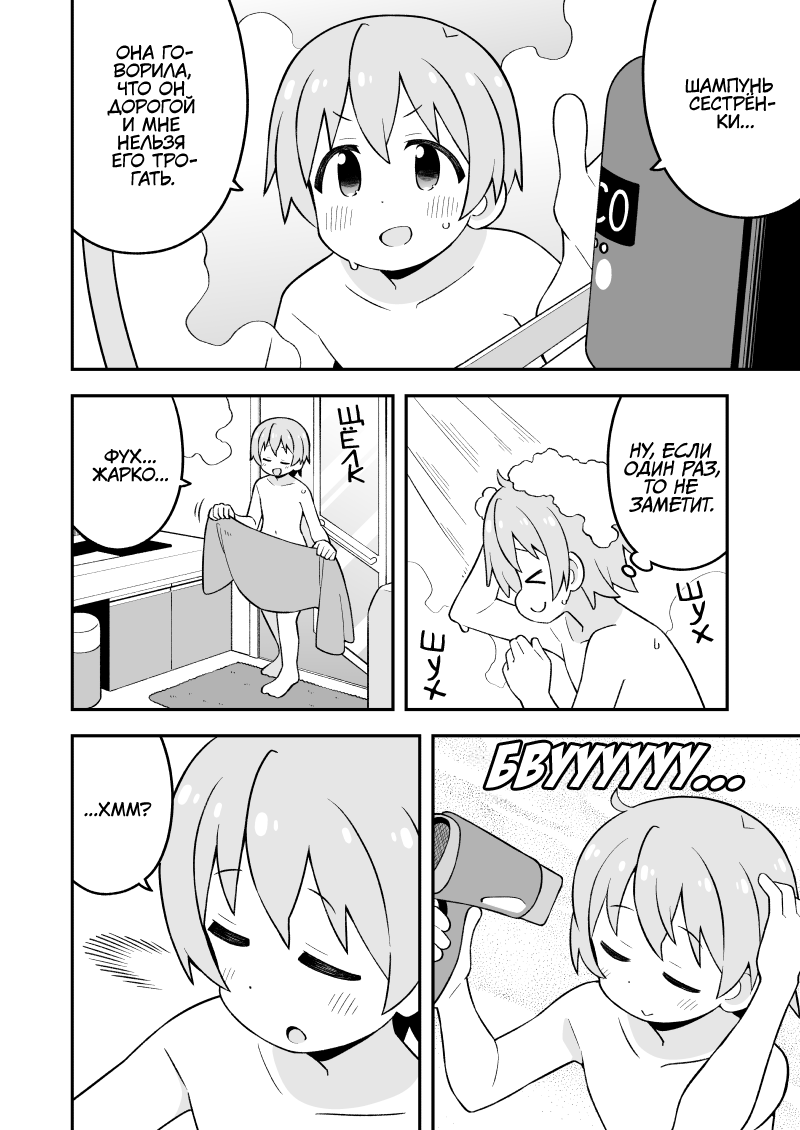
<style>
.page{position:relative;width:800px;height:1130px;background:#ffffff}
.page>*{position:absolute;margin:0}
.t1{font:18px "KuraiVoice2";color:#000000;text-transform:uppercase}
.t2{font:24px "v_Augie";color:#000000;text-transform:uppercase;font-weight:bold}
.t3{font:18px "CCMeanwhile";color:#000000;text-transform:uppercase;font-style:italic}
.t4{font:36px "v_Augie";color:#000000}
.t5{font:66px "BadaBoom";color:#ffffff;font-style:italic}
</style>
<div class="page">
<p class="t1" style="left:107px;top:45px;width:90px;height:141px;text-align:center">Она го-<br>ворила,<br>что он<br>дорогой<br>и мне<br>нельзя<br>его тро-<br>гать.</p>
<p class="t1" style="left:685px;top:77px;width:91px;height:52px;text-align:center">Шампунь<br>сестрён-<br>ки...</p>
<p class="t2" style="left:337px;top:404px;width:28px;height:22px;rotate:-11deg">щ</p>
<p class="t2" style="left:340px;top:426px;width:20px;height:23px;rotate:-6deg">ё</p>
<p class="t1" style="left:92px;top:448px;width:76px;height:34px;text-align:center">Фух...<br>Жарко...</p>
<p class="t2" style="left:341px;top:449px;width:18px;height:19px;rotate:21deg">л</p>
<p class="t3" style="left:624px;top:442px;width:96px;height:71px;text-align:center">Ну, если<br>один раз,<br>то не<br>заметит.</p>
<p class="t2" style="left:348px;top:464px;width:17px;height:19px">к</p>
<p class="t4" style="left:676px;top:580px;width:27px;height:21px;rotate:-9deg">ш</p>
<p class="t4" style="left:689px;top:600px;width:16px;height:26px;rotate:10deg">у</p>
<p class="t4" style="left:420px;top:630px;width:25px;height:22px;rotate:9deg">ш</p>
<p class="t4" style="left:691px;top:624px;width:23px;height:20px;rotate:-10deg">х</p>
<p class="t4" style="left:427px;top:654px;width:14px;height:27px;rotate:4deg">у</p>
<p class="t4" style="left:423px;top:679px;width:24px;height:21px;rotate:-17deg">х</p>
<p class="t5" style="left:485px;top:742px;width:258px;height:47px">бвуууууу...</p>
<p class="t1" style="left:84px;top:801px;width:68px;height:16px">...Хмм?</p>
</div>
